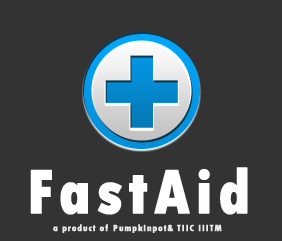
<style>
.page{position:relative;width:282px;height:241px;background:#333333}
.page>*{position:absolute;margin:0}
.t1{font:66.1px "TwCenMT-CondensedExtraBold";letter-spacing:0.06em;color:#ffffff;font-weight:bold}
.t2{font:9.8px "TwCenMT-CondensedExtraBold";letter-spacing:0.06em;color:#ececec;font-weight:bold}
</style>
<div class="page">
<p class="t1" style="left:30px;top:167px;width:218px;height:48px">FastAid</p>
<p class="t2" style="left:53px;top:224px;width:169px;height:9px">a product of Pumpkinpot&amp; TIIC IIITM</p>
</div>
